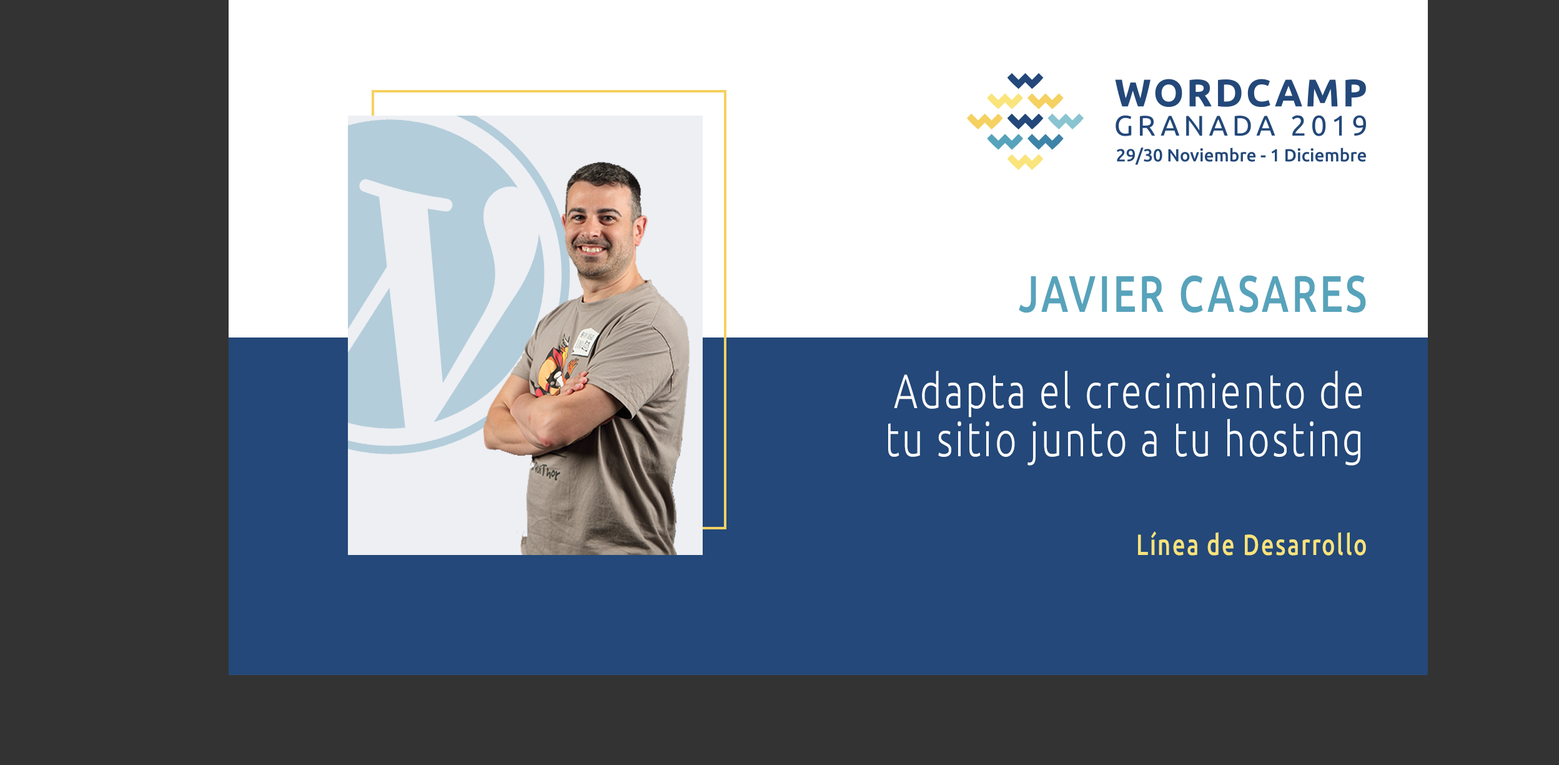
<style>
.page{position:relative;width:1559px;height:765px;background:#333333}
.page>*{position:absolute;margin:0}
.t1{font:51.4px "Ubuntu-Medium";letter-spacing:0.068em;color:#57a3bb;text-transform:uppercase;scale:0.77 1}
.t2{font:48.2px/48.2px "Ubuntu-Light";letter-spacing:0.068em;color:#ffffff;scale:0.77 1}
.t3{font:29.2px "Ubuntu-Medium";letter-spacing:0.068em;color:#f9e37b;scale:0.77 1}
</style>
<div class="page">
<p class="t1" style="left:1019px;top:275px;width:347px;height:38px">Javier Casares</p>
<p class="t2" style="left:888px;top:370px;width:474px;height:95px;text-align:right">Adapta el crecimiento de tu sitio junto a tu hosting</p>
<p class="t3" style="left:1138px;top:531px;width:228px;height:24px">Línea de Desarrollo</p>
</div>
